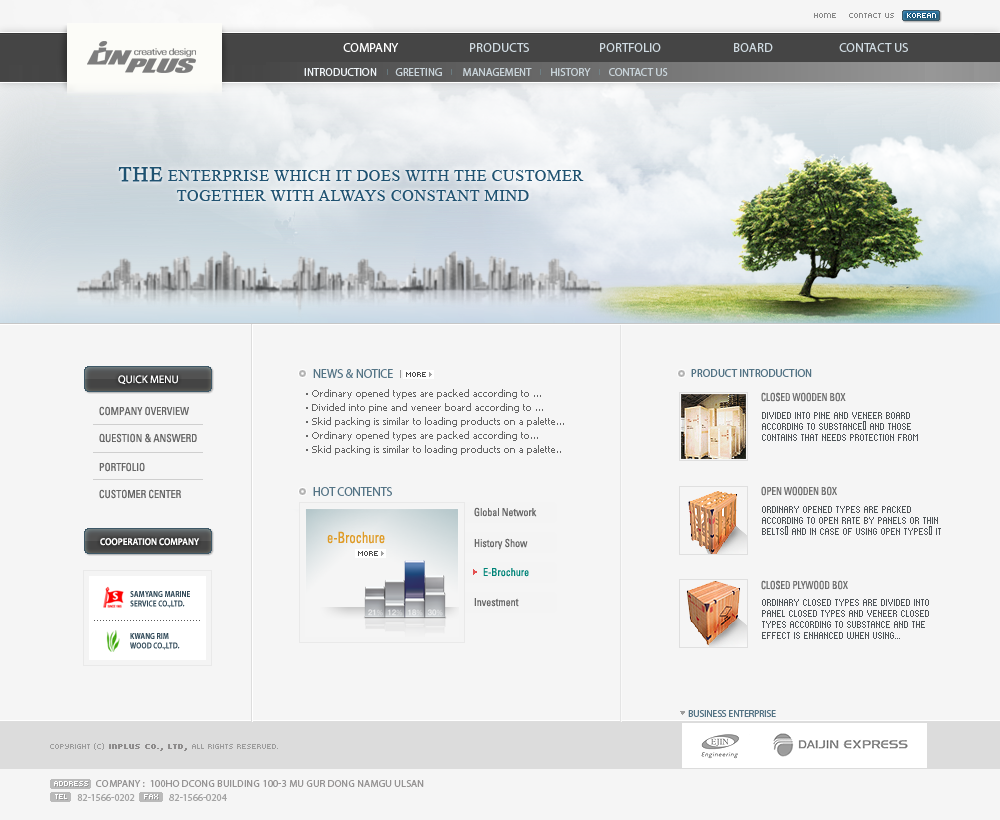
<style>
.page{position:relative;width:1000px;height:820px;background:#f5f5f5}
.page>*{position:absolute;margin:0}
.t1{font:12.3px "MyriadPro-Regular";color:#ffffff;scale:1.05 1}
.t2{font:12.3px "MyriadPro-Regular";color:#cfdae1;scale:1.05 1}
.t3{font:11px "MyriadPro-Regular";color:#c7d2d8;text-transform:uppercase}
.t4{font:11px "MyriadPro-Regular";color:#edf3f7;text-transform:uppercase}
.t5{font:16px/20px "TimesNewRomanPSMT";letter-spacing:0.04em;color:#1f5271;text-transform:uppercase}
.t6{font:21px/20px "TimesNewRomanPSMT";letter-spacing:0.04em;color:#1f5271;text-transform:uppercase;font-weight:bold}
.t7{font:11px "MyriadPro-Regular";color:#ffffff}
.t8{font:12.1px "MyriadPro-Regular";color:#547485;text-transform:uppercase}
.t9{font:11px "MyriadPro-Regular";color:#547485;text-transform:uppercase}
.t10{font:10px/14px "Tahoma";color:#666666}
.t11{font:10px/14px "Gulim";color:#666666}
.t12{font:11px "Univers-Condensed";color:#6d6d6d;text-transform:uppercase;scale:0.82 1}
.t13{font:11px "Univecon";color:#666666;scale:0.91 1}
.t14{font:8px/11px "Standard0757";color:#4f5559}
.t15{font:15.4px "Univecon";color:#df9b26;scale:0.82 1}
.t16{font:9.9px "MyriadPro-Semibold";color:#ffffff;scale:0.91 1}
.t17{font:8px "Dotum";color:#e35151}
.t18{font:11px "Univecon";color:#008478;scale:0.91 1}
.t19{font:8.8px "MyriadPro-Bold";color:#314a59;scale:0.82 1}
.t20{font:8px "Gulim";color:#9c9c9c;text-transform:uppercase}
.t21{font:10px "MyriadPro-Regular";color:#547485;scale:0.95 1}
.t22{font:8px "Kroeger0555";color:#9c9c9c;text-transform:uppercase}
.t23{font:8px "Kroeger0555";color:#8e8c8c;text-transform:uppercase;font-weight:bold}
.t24{font:8px "Kroeger0555";color:#ffffff}
.t25{font:8px "Kroeger0555";color:#999999}
.t26{font:10px "MyriadPro-Regular";letter-spacing:0.02em;color:#969494;text-transform:uppercase}
.t27{font:10px "MyriadPro-Regular";color:#a4a4a4;text-transform:uppercase}
</style>
<div class="page">
<p class="t1" style="left:343px;top:43px;width:56px;height:9px">COMPANY</p>
<p class="t2" style="left:470px;top:43px;width:59px;height:9px">PRODUCTS</p>
<p class="t2" style="left:600px;top:43px;width:61px;height:9px">PORTFOLIO</p>
<p class="t2" style="left:734px;top:43px;width:39px;height:9px">BOARD</p>
<p class="t2" style="left:839px;top:43px;width:69px;height:9px">CONTACT US</p>
<p class="t3" style="left:304px;top:68px;width:364px;height:8px"><span class="t4">introduction</span>        greeting         management        history        contact us</p>
<p class="t5" style="left:118px;top:167px;width:466px;height:34px;text-align:center"><span class="t6">The</span> enterprise which it does with the customer <br>together with always constant mind</p>
<p class="t7" style="left:118px;top:375px;width:60px;height:10px">QUICK MENU</p>
<p class="t8" style="left:313px;top:369px;width:80px;height:9px">NEWS &amp; NOTICE</p>
<p class="t9" style="left:691px;top:369px;width:121px;height:8px">product introduction</p>
<p class="t10" style="left:306px;top:389px;width:258px;height:66px"><span class="t11">ㆍ</span>Ordinary opened types are packed according to ...<br><span class="t11">ㆍ</span>Divided into pine and veneer board according to ...<br><span class="t11">ㆍ</span>Skid packing is similar to loading products on a palette...<br><span class="t11">ㆍ</span>Ordinary opened types are packed according to...<br><span class="t11">ㆍ</span>Skid packing is similar to loading products on a palette..</p>
<p class="t12" style="left:761px;top:392px;width:85px;height:10px">Closed WOODEN box</p>
<p class="t13" style="left:99px;top:406px;width:90px;height:10px">COMPANY OVERVIEW</p>
<p class="t14" style="left:762px;top:412px;width:156px;height:29px">Divided into pine and veneer board <br>according to substance, and those <br>contains that needs protection from</p>
<p class="t13" style="left:99px;top:433px;width:98px;height:10px">QUESTION &amp; ANSWERD</p>
<p class="t13" style="left:99px;top:462px;width:46px;height:10px">PORTFOLIO</p>
<p class="t12" style="left:761px;top:486px;width:76px;height:10px">OPEN WOODEN BOX</p>
<p class="t13" style="left:99px;top:489px;width:82px;height:10px">CUSTOMER CENTER</p>
<p class="t8" style="left:313px;top:487px;width:79px;height:9px">HOT CONTENTS</p>
<p class="t13" style="left:474px;top:507px;width:63px;height:10px">Global Network</p>
<p class="t14" style="left:762px;top:506px;width:179px;height:29px">Ordinary opened types are packed <br>according to open rate by panels or thin <br>belts, and in case of using open types, it</p>
<p class="t15" style="left:327px;top:531px;width:58px;height:13px">e-Brochure</p>
<p class="t16" style="left:100px;top:538px;width:100px;height:8px">COOPERATION COMPANY</p>
<p class="t13" style="left:474px;top:538px;width:54px;height:12px">History Show</p>
<p class="t17" style="left:473px;top:569px;width:4px;height:6px">▶</p>
<p class="t18" style="left:483px;top:568px;width:46px;height:9px">E-Brochure</p>
<p class="t12" style="left:761px;top:580px;width:87px;height:10px">CLOSED PLYWOOD BOX</p>
<p class="t19" style="left:130px;top:591px;width:60px;height:17px">SAMYANG MARINE<br>SERVICE CO.,LTD.</p>
<p class="t13" style="left:474px;top:598px;width:45px;height:9px">Investment</p>
<p class="t14" style="left:762px;top:599px;width:167px;height:40px">Ordinary closed types are divided into <br>panel closed types and veneer closed <br>types according to substance and the <br>effect is enhanced when using...</p>
<p class="t19" style="left:130px;top:633px;width:50px;height:17px">KWANG RIM<br>WOOD CO.,LTD.</p>
<p class="t20" style="left:680px;top:711px;width:5px;height:4px">▼</p>
<p class="t21" style="left:688px;top:710px;width:88px;height:7px">BUSINESS ENTERPRISE</p>
<p class="t22" style="left:50px;top:743px;width:228px;height:8px">Copyright (c)<span class="t23"> INPLUS Co., Ltd, </span>All Rights Reserved.</p>
<p class="t24" style="left:54px;top:781px;width:34px;height:5px">ADDRESS</p>
<p class="t25" style="left:55px;top:782px;width:34px;height:5px">ADDRESS</p>
<p class="t26" style="left:96px;top:780px;width:328px;height:7px">company :  100ho dcong building 100-3 mu gur dong namgu ulsan</p>
<p class="t24" style="left:55px;top:794px;width:12px;height:5px">TEL</p>
<p class="t25" style="left:56px;top:795px;width:12px;height:5px">TEL</p>
<p class="t27" style="left:77px;top:794px;width:58px;height:7px">82-1566-0202</p>
<p class="t24" style="left:144px;top:794px;width:14px;height:5px">FAX</p>
<p class="t25" style="left:145px;top:795px;width:14px;height:5px">FAX</p>
<p class="t27" style="left:169px;top:794px;width:58px;height:7px">82-1566-0204</p>
</div>
